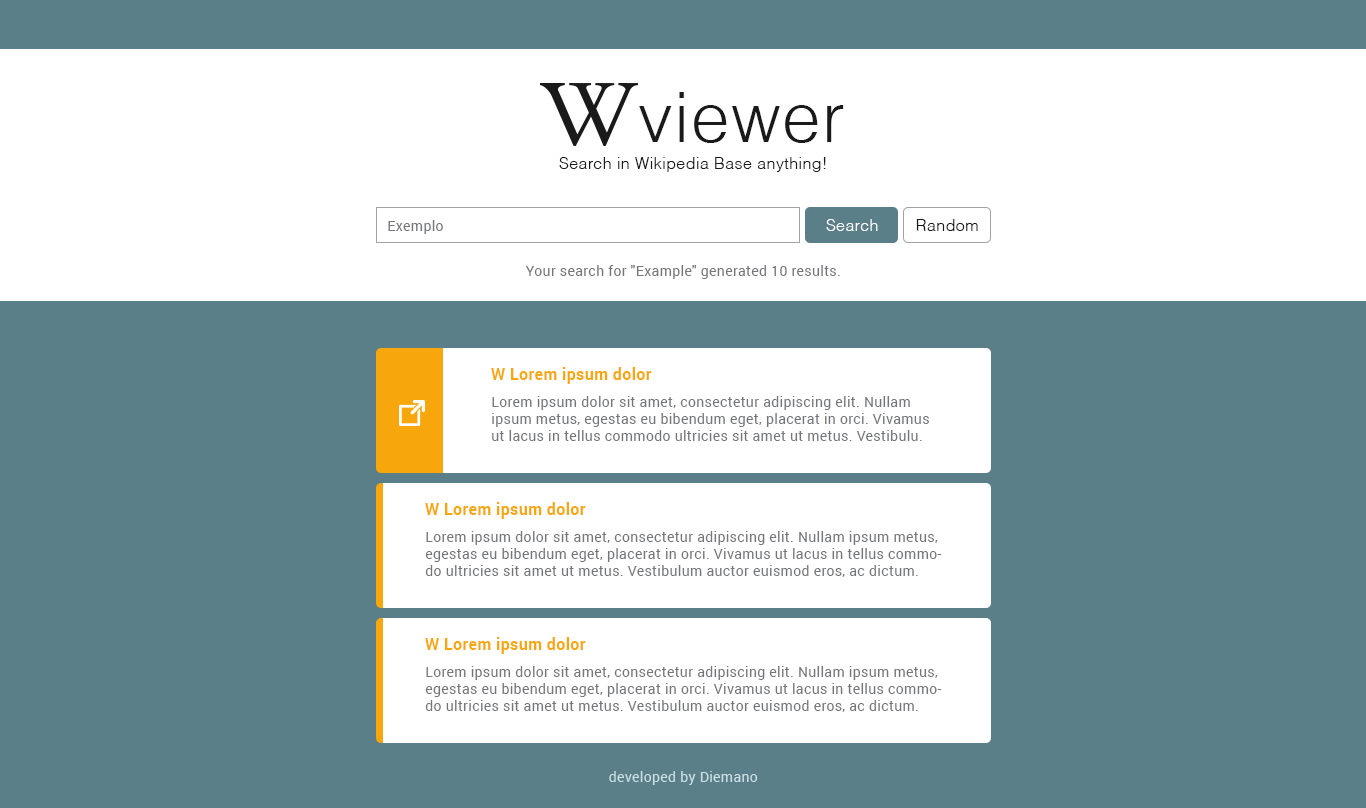
<style>
.page{position:relative;width:1366px;height:808px;background:#5a7f88}
.page>*{position:absolute;margin:0}
.t1{font:68.8px "Helvetica-Light";letter-spacing:0.025em;color:#1a1a1a}
.t2{font:16.1px "Helvetica-Light";letter-spacing:0.025em;color:#1a1a1a}
.t3{font:14px "Roboto-Regular";letter-spacing:0.025em;color:#747679}
.t4{font:16.1px "Helvetica-Light";letter-spacing:0.025em;color:#ffffff}
.t5{font:16px "Roboto-Bold";letter-spacing:0.025em;color:#f7a60c}
.t6{font:14px "Roboto-Regular";letter-spacing:0.025em;color:#cae0e5}
</style>
<div class="page">
<p class="t1" style="left:639px;top:92px;width:205px;height:51px">viewer</p>
<p class="t2" style="left:559px;top:157px;width:267px;height:15px">Search in Wikipedia Base anything!</p>
<p class="t3" style="left:388px;top:220px;width:55px;height:14px">Exemplo</p>
<p class="t4" style="left:826px;top:219px;width:52px;height:12px">Search</p>
<p class="t2" style="left:916px;top:219px;width:62px;height:12px">Random</p>
<p class="t3" style="left:525px;top:265px;width:315px;height:14px">Your search for "Example" generated 10 results.</p>
<p class="t5" style="left:491px;top:367px;width:161px;height:17px">W Lorem ipsum dolor</p>
<p class="t3" style="left:492px;top:396px;width:437px;height:45px">Lorem ipsum dolor sit amet, consectetur adipiscing elit. Nullam ipsum metus, egestas eu bibendum eget, placerat in orci. Vivamus ut lacus in tellus commodo ultricies sit amet ut metus. Vestibulu.</p>
<p class="t5" style="left:425px;top:502px;width:161px;height:17px">W Lorem ipsum dolor</p>
<p class="t3" style="left:425px;top:531px;width:517px;height:46px">Lorem ipsum dolor sit amet, consectetur adipiscing elit. Nullam ipsum metus, egestas eu bibendum eget, placerat in orci. Vivamus ut lacus in tellus commodo ultricies sit amet ut metus. Vestibulum auctor euismod eros, ac dictum.</p>
<p class="t5" style="left:425px;top:637px;width:161px;height:17px">W Lorem ipsum dolor</p>
<p class="t3" style="left:425px;top:666px;width:517px;height:46px">Lorem ipsum dolor sit amet, consectetur adipiscing elit. Nullam ipsum metus, egestas eu bibendum eget, placerat in orci. Vivamus ut lacus in tellus commodo ultricies sit amet ut metus. Vestibulum auctor euismod eros, ac dictum.</p>
<p class="t6" style="left:609px;top:771px;width:149px;height:14px">developed by Diemano</p>
</div>
